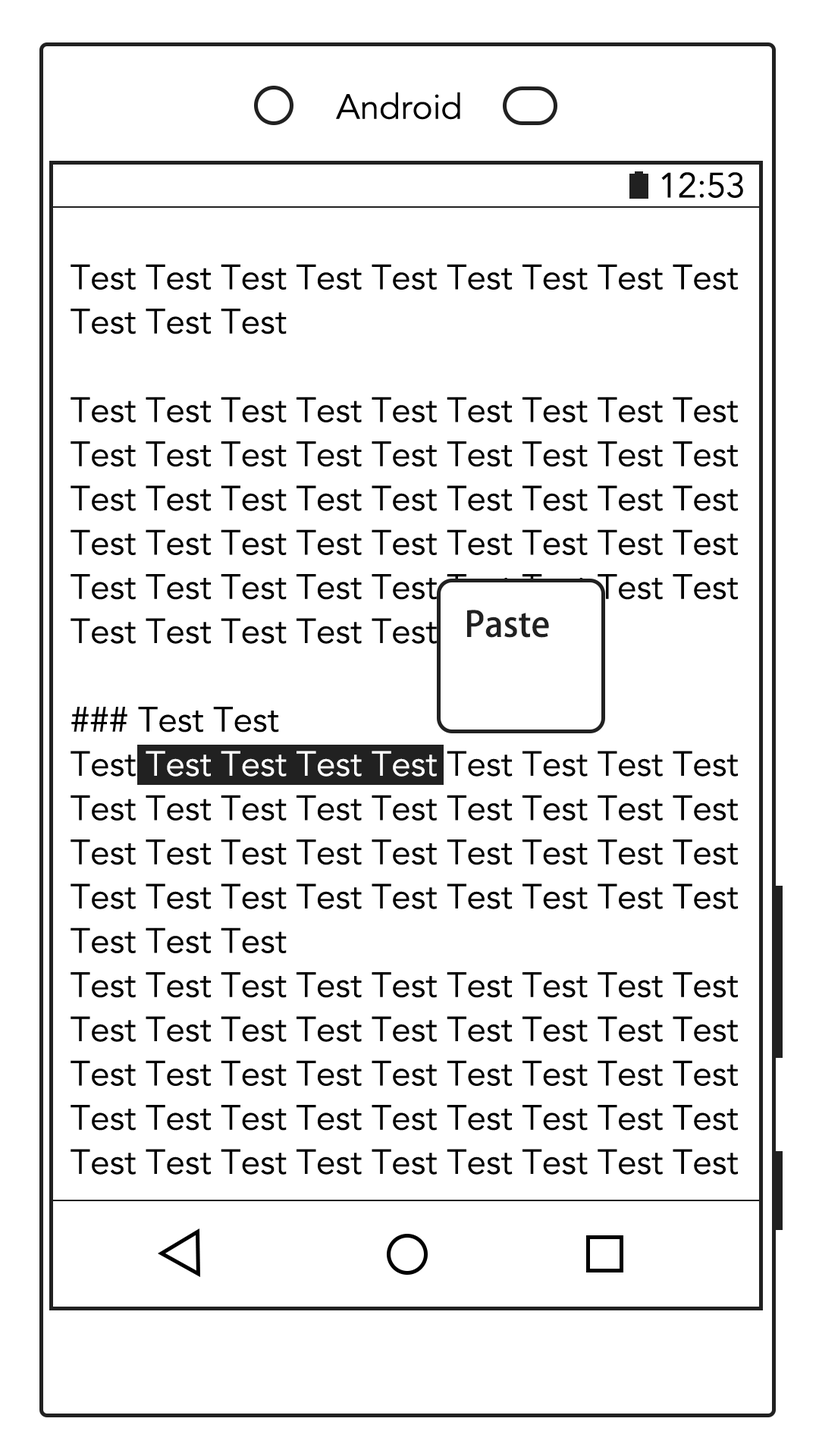
<style>
.page{position:relative;width:819px;height:1456px;background:#ffffff}
.page>*{position:absolute;margin:0}
.t1{font:34.8px "Avenir-Book";color:#000000}
.t2{font:34.8px/44.2px "Avenir-Book";color:#000000}
.t3{font:34.8px/44.2px "Avenir-Book";color:#ffffff}
.t4{font:34.8px "AdobeHeitiStd-Regular";color:#212121}
</style>
<div class="page">
<p class="t1" style="left:336px;top:92px;width:124px;height:28px">Android</p>
<p class="t1" style="left:661px;top:172px;width:82px;height:26px">12:53</p>
<p class="t2" style="left:71px;top:264px;width:667px;height:911px">Test Test Test Test Test Test Test Test Test<br>Test Test Test <br><br>Test Test Test Test Test Test Test Test Test<br>Test Test Test Test Test Test Test Test Test<br>Test Test Test Test Test Test Test Test Test<br>Test Test Test Test Test Test Test Test Test<br>Test Test Test Test Test Test Test Test Test<br>Test Test Test Test Test Test Test <br><br>### Test Test<br>Test <span class="t3">Test Test Test Test</span> Test Test Test Test<br>Test Test Test Test Test Test Test Test Test<br>Test Test Test Test Test Test Test Test Test<br>Test Test Test Test Test Test Test Test Test<br>Test Test Test <br>Test Test Test Test Test Test Test Test Test<br>Test Test Test Test Test Test Test Test Test<br>Test Test Test Test Test Test Test Test Test<br>Test Test Test Test Test Test Test Test Test<br>Test Test Test Test Test Test Test Test Test</p>
<p class="t4" style="left:467px;top:610px;width:82px;height:28px">Paste</p>
</div>
